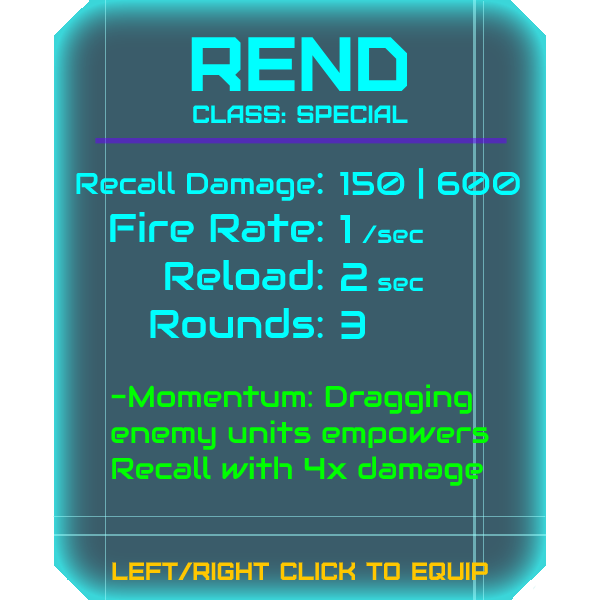
<style>
.page{position:relative;width:600px;height:600px;background:#3a5c6a}
.page>*{position:absolute;margin:0}
.t1{font:76.8px "Furore";color:#00ffff}
.t2{font:25px "Furore";color:#00ffff}
.t3{font:40px "Audiowide-Regular";color:#00ffff}
.t4{font:30px "Audiowide-Regular";color:#00ffff}
.t5{font:33px "Audiowide-Regular";color:#00ffff}
.t6{font:25px "Audiowide-Regular";color:#00ffff}
.t7{font:30px "Audiowide-Regular";color:#00ff00}
.t8{font:25px "Furore";color:#ffc700}
</style>
<div class="page">
<p class="t1" style="left:191px;top:37px;width:217px;height:54px">Rend</p>
<p class="t2" style="left:193px;top:105px;width:215px;height:18px">Class: Special</p>
<p class="t3" style="left:76px;top:171px;width:247px;height:167px;text-align:right"><span class="t4">Recall Damage</span>:<br>Fire Rate:<br>Reload:<br>Rounds:</p>
<p class="t5" style="left:340px;top:168px;width:180px;height:171px">150 | 600<br><span class="t3">1 </span><span class="t6">/sec<br></span><span class="t3">2 </span><span class="t6">sec<br></span><span class="t3">3</span></p>
<p class="t7" style="left:111px;top:384px;width:378px;height:102px">-Momentum: Dragging<br>enemy units empowers<br>Recall with 4x damage</p>
<p class="t8" style="left:112px;top:562px;width:376px;height:18px">left/right click to equip</p>
</div>
